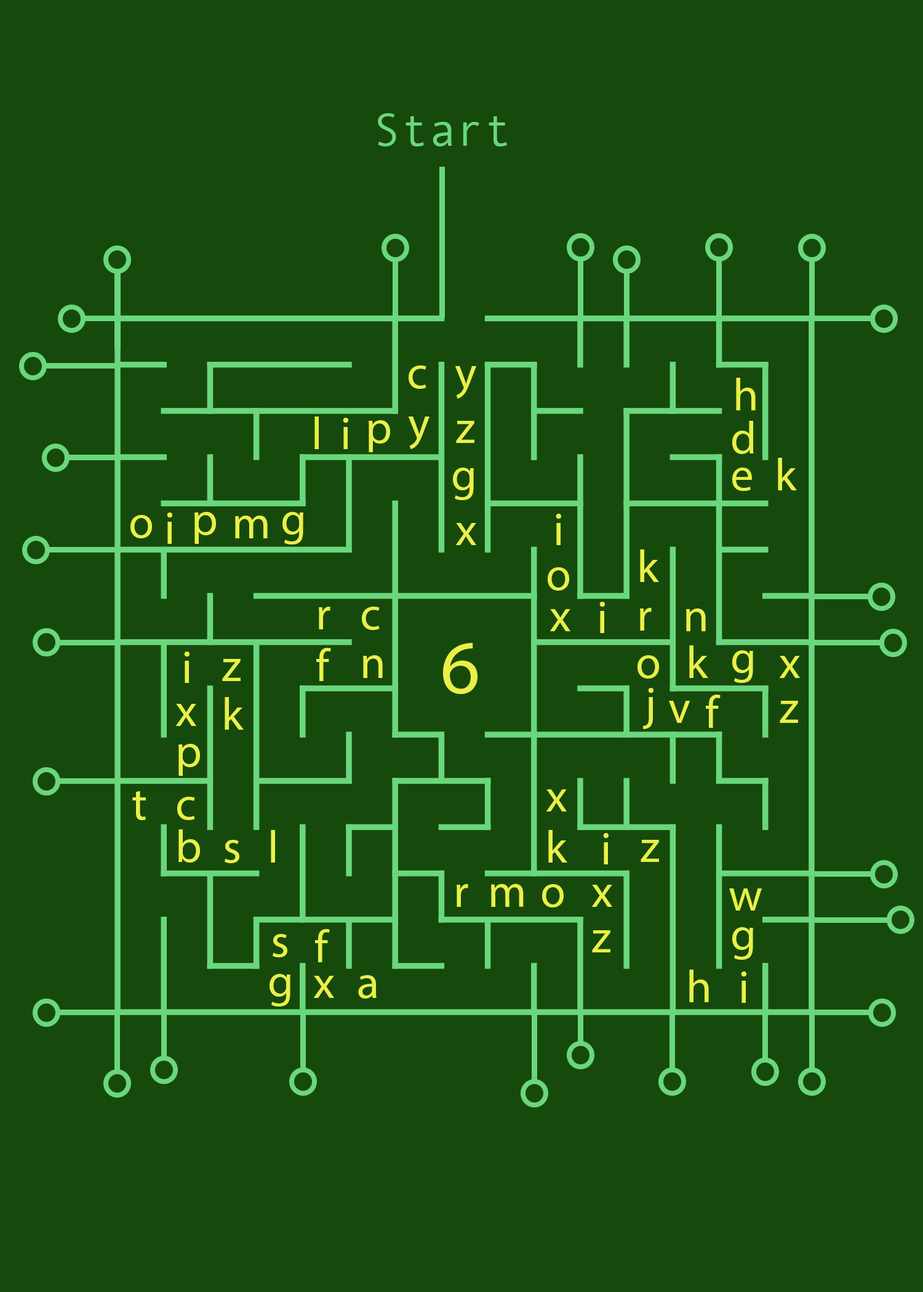
<style>
.page{position:relative;width:923px;height:1292px;background:#164a0d}
.page>*{position:absolute;margin:0}
.t1{font:46.1px "AndaleMono";color:#6ad77c}
.t2{font:46.1px "MyriadPro-Regular";color:#eaf048}
.t3{font:76.9px "MyriadPro-Regular";color:#eaf048}
</style>
<div class="page">
<p class="t1" style="left:378px;top:113px;width:129px;height:33px">Start</p>
<p class="t2" style="left:409px;top:365px;width:17px;height:24px">c</p>
<p class="t2" style="left:455px;top:366px;width:21px;height:33px">y</p>
<p class="t2" style="left:736px;top:378px;width:20px;height:32px">h</p>
<p class="t2" style="left:314px;top:417px;width:5px;height:32px">l</p>
<p class="t2" style="left:343px;top:418px;width:5px;height:31px">i</p>
<p class="t2" style="left:369px;top:420px;width:21px;height:32px">p</p>
<p class="t2" style="left:408px;top:417px;width:21px;height:32px">y</p>
<p class="t2" style="left:456px;top:421px;width:18px;height:22px">z</p>
<p class="t2" style="left:732px;top:421px;width:22px;height:33px">d</p>
<p class="t2" style="left:778px;top:458px;width:19px;height:32px">k</p>
<p class="t2" style="left:453px;top:468px;width:21px;height:32px">g</p>
<p class="t2" style="left:732px;top:468px;width:20px;height:23px">e</p>
<p class="t2" style="left:130px;top:515px;width:22px;height:23px">o</p>
<p class="t2" style="left:167px;top:513px;width:5px;height:31px">i</p>
<p class="t2" style="left:194px;top:512px;width:22px;height:32px">p</p>
<p class="t2" style="left:235px;top:516px;width:33px;height:22px">m</p>
<p class="t2" style="left:282px;top:512px;width:21px;height:33px">g</p>
<p class="t2" style="left:556px;top:514px;width:5px;height:31px">i</p>
<p class="t2" style="left:455px;top:523px;width:21px;height:22px">x</p>
<p class="t2" style="left:640px;top:549px;width:19px;height:33px">k</p>
<p class="t2" style="left:548px;top:567px;width:21px;height:24px">o</p>
<p class="t2" style="left:599px;top:602px;width:6px;height:31px">i</p>
<p class="t2" style="left:319px;top:607px;width:11px;height:22px">r</p>
<p class="t2" style="left:362px;top:607px;width:18px;height:23px">c</p>
<p class="t2" style="left:549px;top:609px;width:21px;height:22px">x</p>
<p class="t2" style="left:640px;top:608px;width:12px;height:23px">r</p>
<p class="t2" style="left:686px;top:608px;width:20px;height:23px">n</p>
<p class="t2" style="left:184px;top:652px;width:6px;height:31px">i</p>
<p class="t2" style="left:316px;top:648px;width:15px;height:33px">f</p>
<p class="t3" style="left:443px;top:643px;width:34px;height:52px">6</p>
<p class="t2" style="left:689px;top:645px;width:19px;height:33px">k</p>
<p class="t2" style="left:732px;top:650px;width:21px;height:33px">g</p>
<p class="t2" style="left:222px;top:659px;width:19px;height:22px">z</p>
<p class="t2" style="left:363px;top:655px;width:20px;height:23px">n</p>
<p class="t2" style="left:637px;top:655px;width:22px;height:24px">o</p>
<p class="t2" style="left:779px;top:656px;width:21px;height:22px">x</p>
<p class="t2" style="left:642px;top:688px;width:11px;height:41px">j</p>
<p class="t2" style="left:225px;top:697px;width:19px;height:33px">k</p>
<p class="t2" style="left:669px;top:701px;width:21px;height:22px">v</p>
<p class="t2" style="left:706px;top:695px;width:14px;height:33px">f</p>
<p class="t2" style="left:780px;top:701px;width:18px;height:22px">z</p>
<p class="t2" style="left:175px;top:704px;width:21px;height:22px">x</p>
<p class="t2" style="left:178px;top:744px;width:22px;height:32px">p</p>
<p class="t2" style="left:132px;top:791px;width:14px;height:29px">t</p>
<p class="t2" style="left:177px;top:797px;width:18px;height:23px">c</p>
<p class="t2" style="left:546px;top:789px;width:21px;height:23px">x</p>
<p class="t2" style="left:178px;top:829px;width:22px;height:34px">b</p>
<p class="t2" style="left:271px;top:830px;width:4px;height:33px">l</p>
<p class="t2" style="left:548px;top:830px;width:19px;height:33px">k</p>
<p class="t2" style="left:603px;top:833px;width:5px;height:31px">i</p>
<p class="t2" style="left:225px;top:840px;width:14px;height:23px">s</p>
<p class="t2" style="left:640px;top:840px;width:19px;height:22px">z</p>
<p class="t2" style="left:457px;top:884px;width:11px;height:23px">r</p>
<p class="t2" style="left:491px;top:884px;width:33px;height:23px">m</p>
<p class="t2" style="left:542px;top:884px;width:22px;height:24px">o</p>
<p class="t2" style="left:591px;top:885px;width:21px;height:22px">x</p>
<p class="t2" style="left:729px;top:888px;width:33px;height:23px">w</p>
<p class="t2" style="left:315px;top:929px;width:15px;height:33px">f</p>
<p class="t2" style="left:732px;top:927px;width:21px;height:33px">g</p>
<p class="t2" style="left:273px;top:934px;width:14px;height:23px">s</p>
<p class="t2" style="left:592px;top:930px;width:18px;height:22px">z</p>
<p class="t2" style="left:269px;top:974px;width:21px;height:33px">g</p>
<p class="t2" style="left:313px;top:976px;width:21px;height:22px">x</p>
<p class="t2" style="left:358px;top:975px;width:19px;height:24px">a</p>
<p class="t2" style="left:689px;top:970px;width:20px;height:32px">h</p>
<p class="t2" style="left:741px;top:972px;width:5px;height:31px">i</p>
</div>
